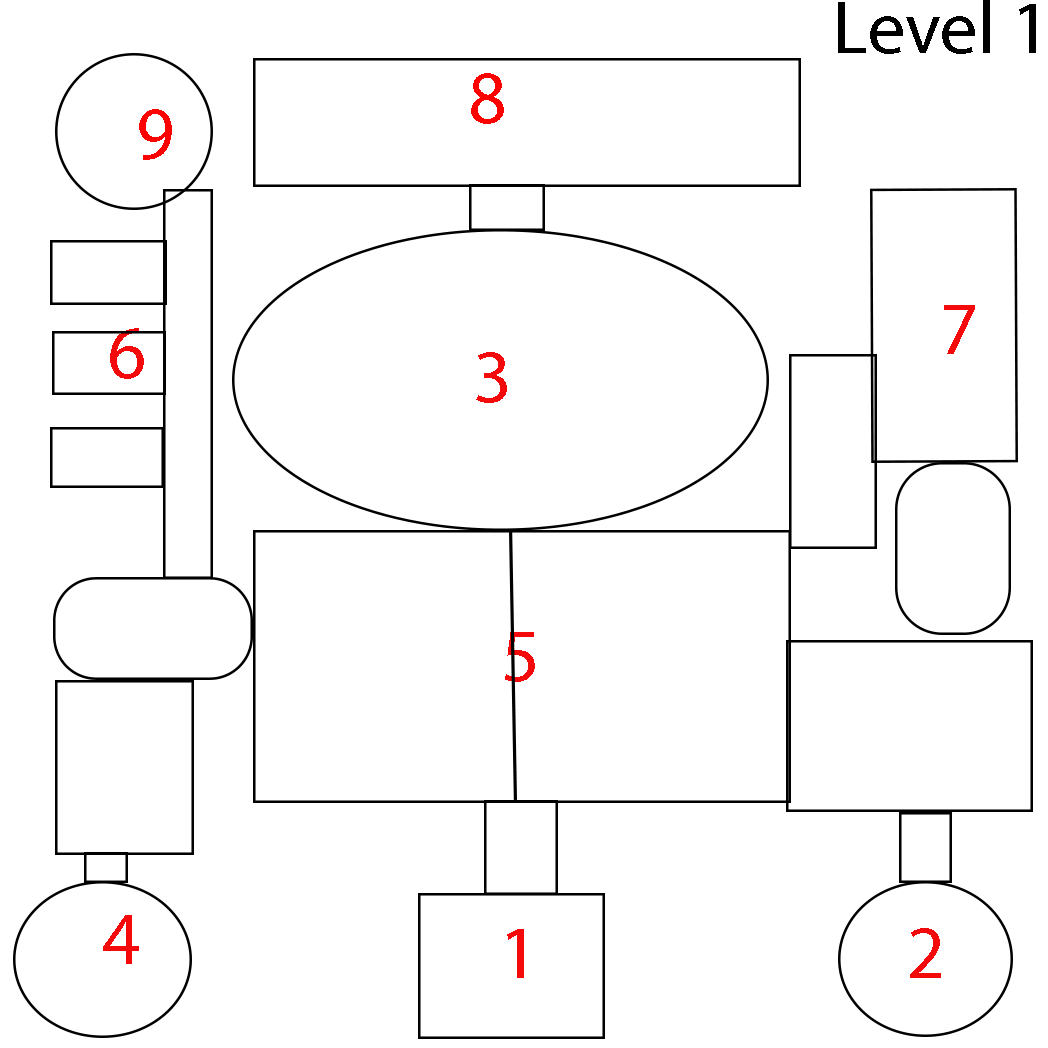
<style>
.page{position:relative;width:1048px;height:1048px;background:#ffffff}
.page>*{position:absolute;margin:0}
.t1{font:75px "MyriadPro-Regular";color:#000000}
.t2{font:75px "MyriadPro-Regular";color:#ff0000}
.t3{font:75px "MyriadPro-Regular";color:#f40a0a}
</style>
<div class="page">
<p class="t1" style="left:838px;top:0px;width:198px;height:54px">Level 1</p>
<p class="t2" style="left:471px;top:73px;width:33px;height:51px">8</p>
<p class="t2" style="left:139px;top:109px;width:33px;height:51px">9</p>
<p class="t3" style="left:944px;top:305px;width:31px;height:49px">7</p>
<p class="t3" style="left:110px;top:328px;width:34px;height:51px">6</p>
<p class="t3" style="left:476px;top:352px;width:31px;height:51px">3</p>
<p class="t3" style="left:505px;top:632px;width:30px;height:50px">5</p>
<p class="t3" style="left:103px;top:915px;width:36px;height:49px">4</p>
<p class="t3" style="left:507px;top:929px;width:17px;height:49px">1</p>
<p class="t3" style="left:910px;top:928px;width:31px;height:50px">2</p>
</div>
